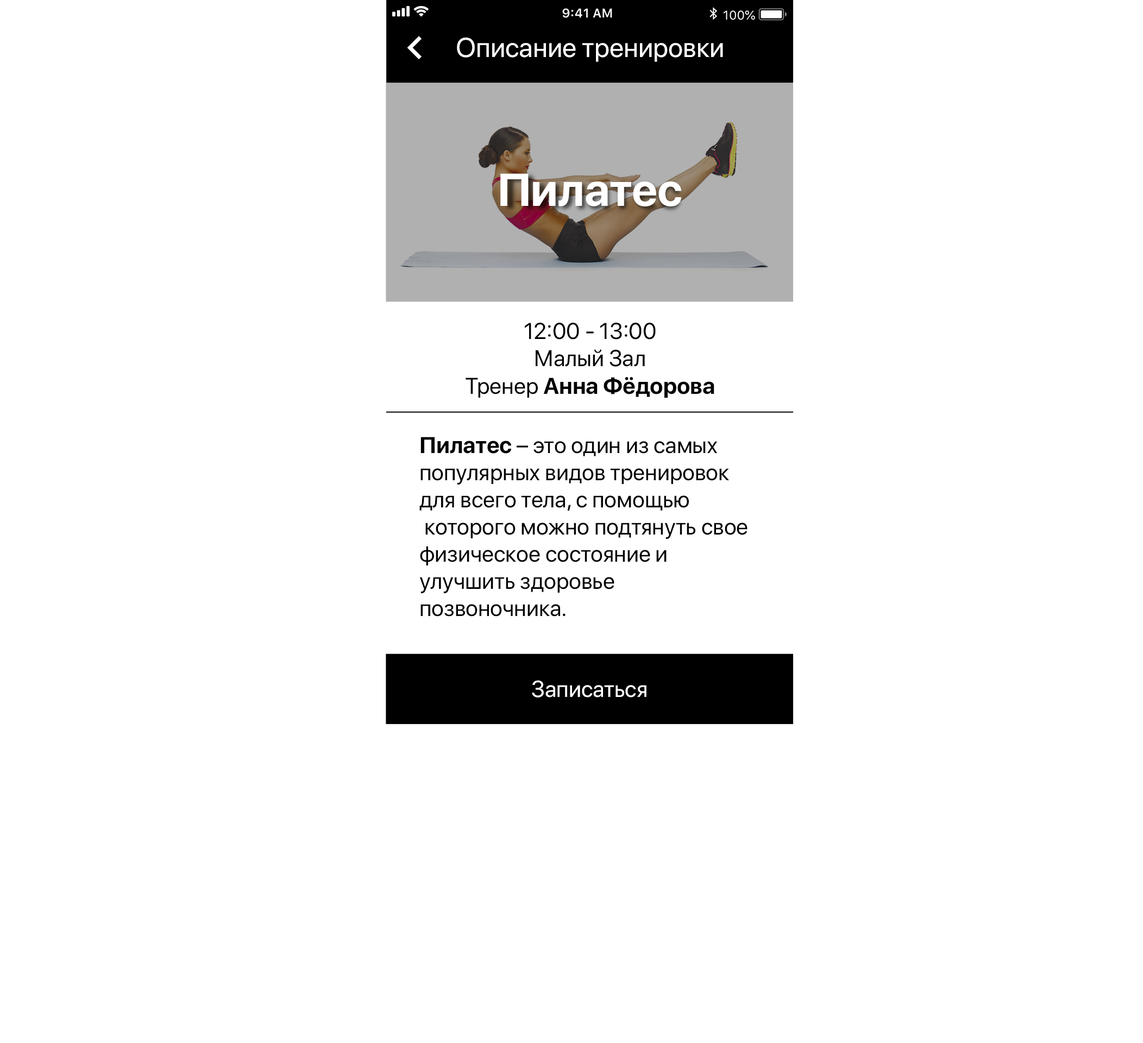
<style>
.page{position:relative;width:1143px;height:1043px;background:#ffffff}
.page>*{position:absolute;margin:0}
.t1{font:27.2px "SFProDisplay-Regular";color:#ffffff}
.t2{font:45.6px "SFProDisplay-Bold";color:#ffffff}
.t3{font:22.8px "SFProDisplay-Regular";color:#000000}
.t4{font:22.8px "SFProDisplay-Bold";color:#000000}
.t5{font:22.8px/27.2px "SFProDisplay-Regular";color:#000000}
.t6{font:22.8px/27.2px "SFProDisplay-Bold";color:#000000}
.t7{font:22.8px "SFProDisplay-Regular";color:#ffffff}
</style>
<div class="page">
<p class="t1" style="left:457px;top:37px;width:266px;height:25px">Описание тренировки</p>
<p class="t2" style="left:500px;top:173px;width:182px;height:33px">Пилатес</p>
<p class="t3" style="left:466px;top:323px;width:248px;height:75px;text-align:center">12:00 - 13:00<br>Малый Зал<br>Тренер <span class="t4">Анна Фёдорова</span></p>
<p class="t5" style="left:419px;top:437px;width:329px;height:180px"><span class="t6">Пилатес</span> – это один из самых <br>популярных видов тренировок <br>для всего тела, с помощью<br> которого можно подтянуть свое <br>физическое состояние и <br>улучшить здоровье <br>позвоночника.</p>
<p class="t7" style="left:532px;top:680px;width:115px;height:18px">Записаться</p>
</div>
